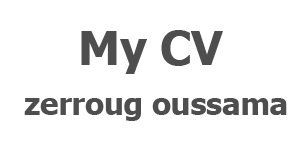
<style>
.page{position:relative;width:300px;height:150px;background:#ffffff}
.page>*{position:absolute;margin:0}
.t1{font:46.7px "Tahoma-Bold";color:#4e4e4e}
.t2{font:30.7px "Tahoma-Bold";color:#4e4e4e}
</style>
<div class="page">
<p class="t1" style="left:81px;top:30px;width:142px;height:44px">My CV</p>
<p class="t2" style="left:24px;top:98px;width:263px;height:23px">zerroug oussama</p>
</div>
